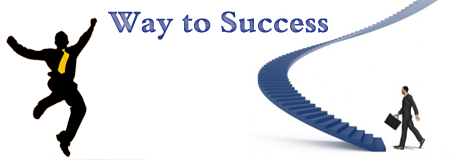
<style>
.page{position:relative;width:450px;height:160px;background:#ffffff}
.page>*{position:absolute;margin:0}
.t1{font:55.3px "TraditionalArabic-Bold"}
</style>
<div class="page">
<p class="t1" style="left:108px;top:11px;width:220px;height:29px">Way to Success</p>
</div>
